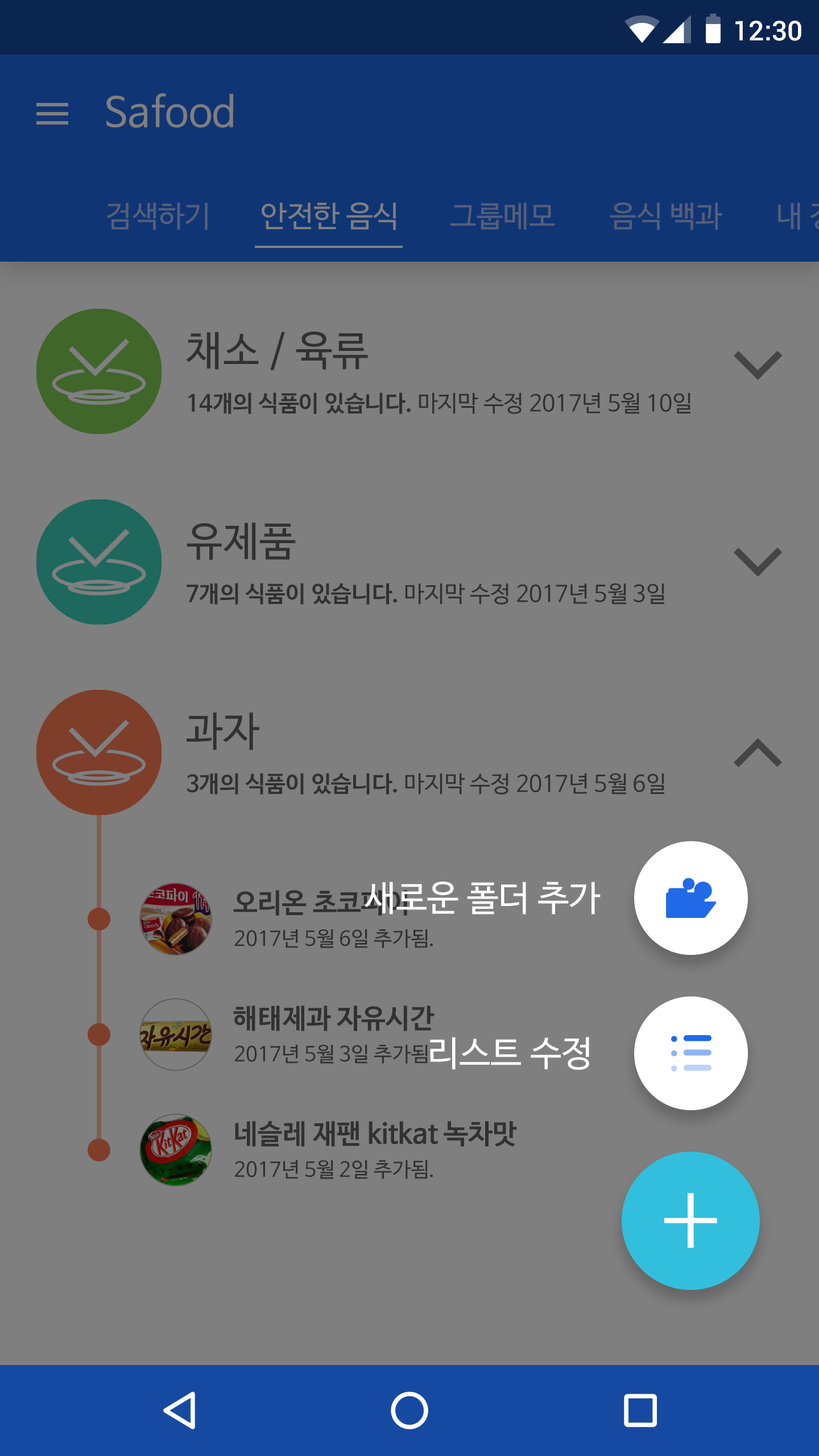
<style>
.page{position:relative;width:819px;height:1456px;background:#7f7f7f}
.page>*{position:absolute;margin:0}
.t1{font:27.3px "Roboto-Medium";color:#ffffff}
.t2{font:40.9px "NanumBarunGothic";color:#7f7f7f}
.t3{font:29.6px "NanumBarunGothic";color:#545f7a}
.t4{font:29.6px "NanumBarunGothic";color:#7f7f7f}
.t5{font:40.9px "NanumBarunGothic";color:#313131}
.t6{font:22.7px "NanumBarunGothic";color:#313131}
.t7{font:22.7px "NanumBarunGothicBold";color:#313131}
.t8{font:35.3px "NanumBarunGothic";color:#ffffff}
.t9{font:27.3px "NanumBarunGothicBold";color:#313131}
.t10{font:20.5px "NanumBarunGothic";color:#313131}
.t11{font:113.7px "NanumBarunGothicLight";color:#fefeff}
</style>
<div class="page">
<p class="t1" style="left:735px;top:20px;width:66px;height:21px">12:30</p>
<p class="t2" style="left:106px;top:93px;width:127px;height:35px">Safood</p>
<p class="t3" style="left:106px;top:202px;width:102px;height:28px">검색하기</p>
<p class="t4" style="left:262px;top:202px;width:134px;height:28px">안전한 음식</p>
<p class="t3" style="left:450px;top:202px;width:105px;height:28px">그룹메모</p>
<p class="t3" style="left:610px;top:202px;width:112px;height:28px">음식 백과</p>
<p class="t5" style="left:186px;top:332px;width:182px;height:38px">채소 / 육류</p>
<p class="t6" style="left:188px;top:392px;width:502px;height:22px"><span class="t7">14개의 식품이 있습니다.</span> 마지막 수정 2017년 5월 10일</p>
<p class="t5" style="left:187px;top:522px;width:109px;height:38px">유제품</p>
<p class="t6" style="left:187px;top:583px;width:477px;height:22px"><span class="t7">7개의 식품이 있습니다.</span> 마지막 수정 2017년 5월 3일</p>
<p class="t5" style="left:187px;top:712px;width:72px;height:38px">과자</p>
<p class="t6" style="left:187px;top:773px;width:477px;height:22px"><span class="t7">3개의 식품이 있습니다.</span> 마지막 수정 2017년 5월 6일</p>
<p class="t8" style="left:364px;top:882px;width:237px;height:33px">새로운 폴더 추가</p>
<p class="t9" style="left:233px;top:890px;width:174px;height:26px">오리온 초코파이</p>
<p class="t10" style="left:235px;top:929px;width:198px;height:19px">2017년 5월 6일 추가됨.</p>
<p class="t9" style="left:233px;top:1006px;width:202px;height:25px">해태제과 자유시간</p>
<p class="t8" style="left:430px;top:1037px;width:159px;height:33px">리스트 수정</p>
<p class="t10" style="left:235px;top:1045px;width:198px;height:19px">2017년 5월 3일 추가됨.</p>
<p class="t9" style="left:235px;top:1121px;width:282px;height:26px">네슬레 재팬 kitkat 녹차맛</p>
<p class="t10" style="left:235px;top:1160px;width:198px;height:19px">2017년 5월 2일 추가됨.</p>
<p class="t11" style="left:664px;top:1193px;width:53px;height:55px">+</p>
</div>
